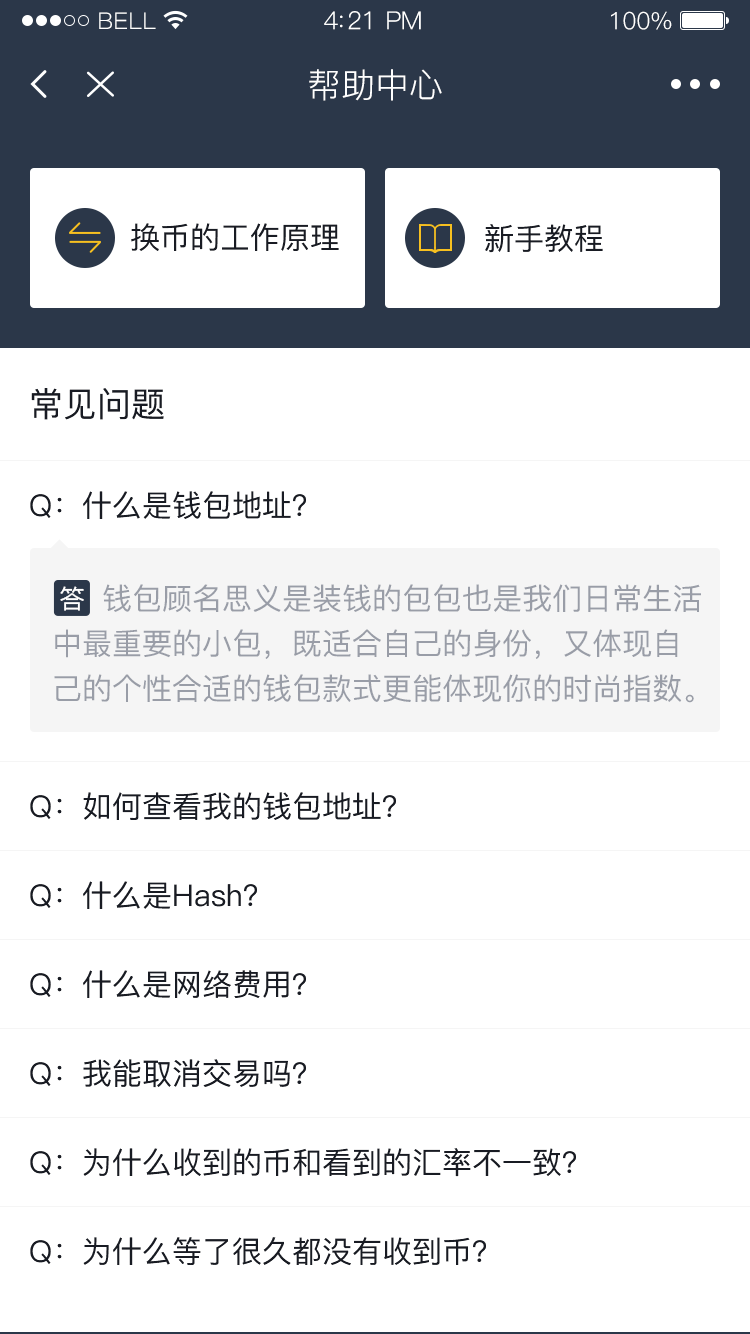
<style>
.page{position:relative;width:750px;height:1334px;background:#ffffff}
.page>*{position:absolute;margin:0}
.t1{font:23px "PingFang-SC-Regular";letter-spacing:0.02em;color:#ffffff}
.t2{font:25px "PingFang-SC-Regular";letter-spacing:-0.02em;color:#ffffff}
.t3{font:24px "PingFang-SC-Regular";letter-spacing:-0.02em;color:#ffffff}
.t4{font:34px "PingFang-SC-Regular";color:#ffffff}
.t5{font:30px "PingFang-SC-Medium";color:#181b23}
.t6{font:34px "PingFang-SC-Medium";color:#181b23}
.t7{font:29.9px/44.9px "PingFang-SC-Medium";color:#999da7}
.t8{font:25.9px "PingFang-SC-Medium";color:#ffffff}
</style>
<div class="page">
<p class="t1" style="left:99px;top:12px;width:57px;height:17px">BELL</p>
<p class="t2" style="left:324px;top:11px;width:97px;height:19px">4:21 PM</p>
<p class="t3" style="left:611px;top:11px;width:61px;height:19px">100%</p>
<p class="t4" style="left:309px;top:69px;width:133px;height:32px">帮助中心</p>
<p class="t5" style="left:131px;top:223px;width:208px;height:28px">换币的工作原理</p>
<p class="t5" style="left:485px;top:224px;width:118px;height:29px">新手教程</p>
<p class="t6" style="left:31px;top:388px;width:133px;height:32px">常见问题</p>
<p class="t5" style="left:30px;top:491px;width:276px;height:28px">Q：什么是钱包地址？</p>
<p class="t7" style="left:54px;top:584px;width:647px;height:119px">钱包顾名思义是装钱的包包也是我们日常生活<br>中最重要的小包，既适合自己的身份，又体现自<br>己的个性合适的钱包款式更能体现你的时尚指数。</p>
<p class="t8" style="left:60px;top:586px;width:24px;height:25px">答</p>
<p class="t5" style="left:30px;top:792px;width:366px;height:28px">Q：如何查看我的钱包地址？</p>
<p class="t5" style="left:30px;top:881px;width:227px;height:28px">Q：什么是Hash？</p>
<p class="t5" style="left:30px;top:970px;width:276px;height:28px">Q：什么是网络费用？</p>
<p class="t5" style="left:30px;top:1059px;width:276px;height:29px">Q：我能取消交易吗？</p>
<p class="t5" style="left:30px;top:1148px;width:546px;height:29px">Q：为什么收到的币和看到的汇率不一致？</p>
<p class="t5" style="left:30px;top:1237px;width:456px;height:29px">Q：为什么等了很久都没有收到币？</p>
</div>
